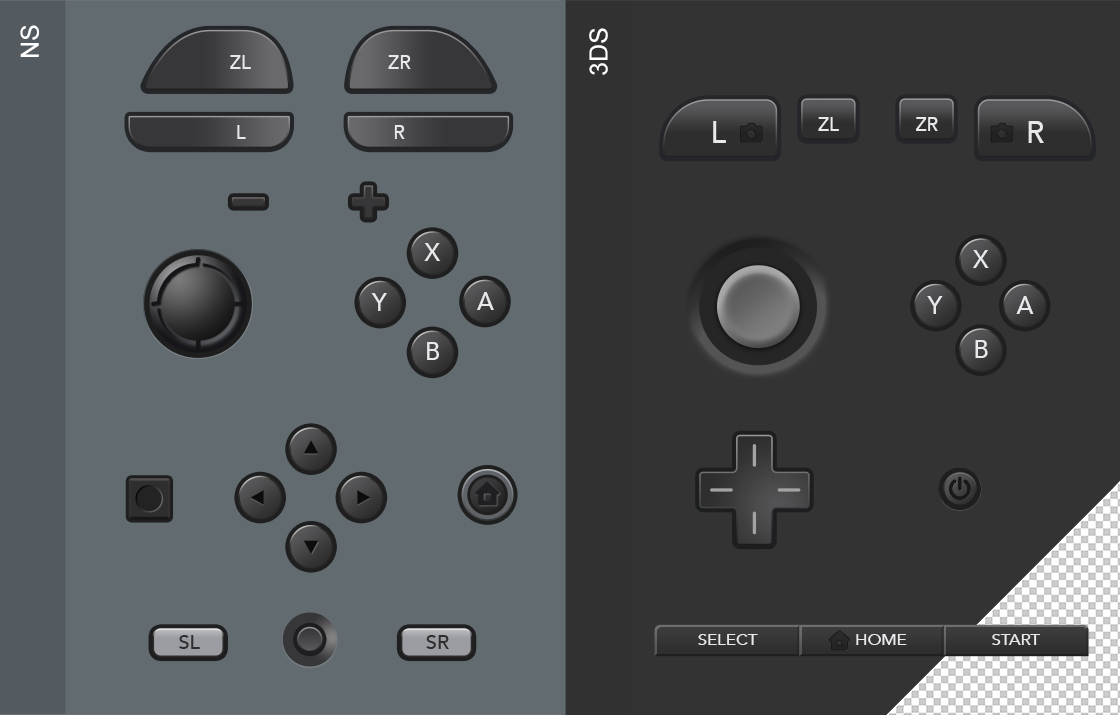
<style>
.page{position:relative;width:1120px;height:715px;background:#626b70}
.page>*{position:absolute;margin:0}
.t1{font:25px "ArialMT";color:#ffffff}
.t2{font:19.1px "Avenir-Medium";color:#e7e9eb}
.t3{font:29.7px "Avenir-Medium";color:#e7e9eb}
.t4{font:18.5px "Avenir-Medium";color:#e7e9eb}
.t5{font:24.2px "Avenir-Medium";color:#e7e9eb}
.t6{font:19.8px "Avenir-Medium";color:#2e2e2f}
.t7{font:15px "Avenir-Medium";color:#e7e9eb;scale:1.11 1}
</style>
<div class="page">
<p class="t1" style="left:20px;top:25px;width:19px;height:32px;rotate:-90deg">NS</p>
<p class="t1" style="left:589px;top:28px;width:19px;height:47px;rotate:-90deg">3DS</p>
<p class="t2" style="left:230px;top:55px;width:21px;height:14px">ZL</p>
<p class="t2" style="left:388px;top:55px;width:23px;height:14px">ZR</p>
<p class="t2" style="left:237px;top:125px;width:9px;height:14px">L</p>
<p class="t2" style="left:394px;top:125px;width:11px;height:14px">R</p>
<p class="t3" style="left:713px;top:121px;width:13px;height:22px">L</p>
<p class="t4" style="left:818px;top:117px;width:21px;height:14px">ZL</p>
<p class="t4" style="left:916px;top:117px;width:22px;height:14px">ZR</p>
<p class="t3" style="left:1028px;top:121px;width:16px;height:22px">R</p>
<p class="t5" style="left:424px;top:243px;width:17px;height:18px">X</p>
<p class="t5" style="left:973px;top:250px;width:16px;height:18px">X</p>
<p class="t5" style="left:371px;top:293px;width:16px;height:18px">Y</p>
<p class="t5" style="left:477px;top:292px;width:17px;height:18px">A</p>
<p class="t5" style="left:927px;top:296px;width:16px;height:18px">Y</p>
<p class="t5" style="left:1016px;top:296px;width:18px;height:18px">A</p>
<p class="t5" style="left:427px;top:342px;width:12px;height:18px">B</p>
<p class="t5" style="left:975px;top:340px;width:13px;height:18px">B</p>
<p class="t6" style="left:179px;top:635px;width:21px;height:14px">SL</p>
<p class="t6" style="left:426px;top:635px;width:23px;height:14px">SR</p>
<p class="t7" style="left:698px;top:634px;width:60px;height:11px">SELECT</p>
<p class="t7" style="left:856px;top:634px;width:51px;height:11px">HOME</p>
<p class="t7" style="left:992px;top:634px;width:48px;height:11px">START</p>
</div>
